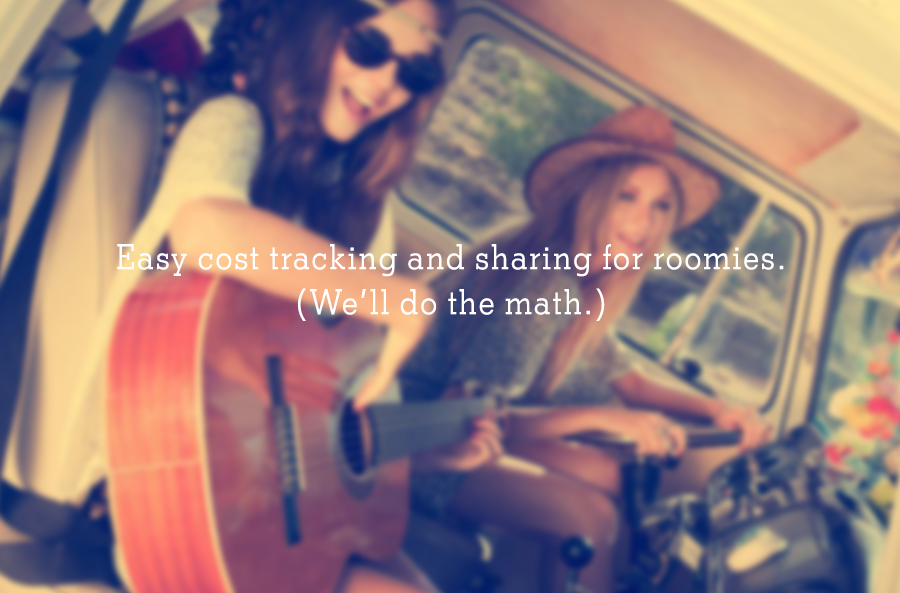
<style>
.page{position:relative;width:900px;height:593px}
.page>*{position:absolute;margin:0}
.t1{font:35px/45px "StymieNYT-Medium";letter-spacing:0.06em;color:#ffffff;scale:0.9 1}
</style>
<div class="page">
<p class="t1" style="left:117px;top:244px;width:667px;height:77px;text-align:center">Easy cost tracking and sharing for roomies.<br>(We’ll do the math.)</p>
</div>
